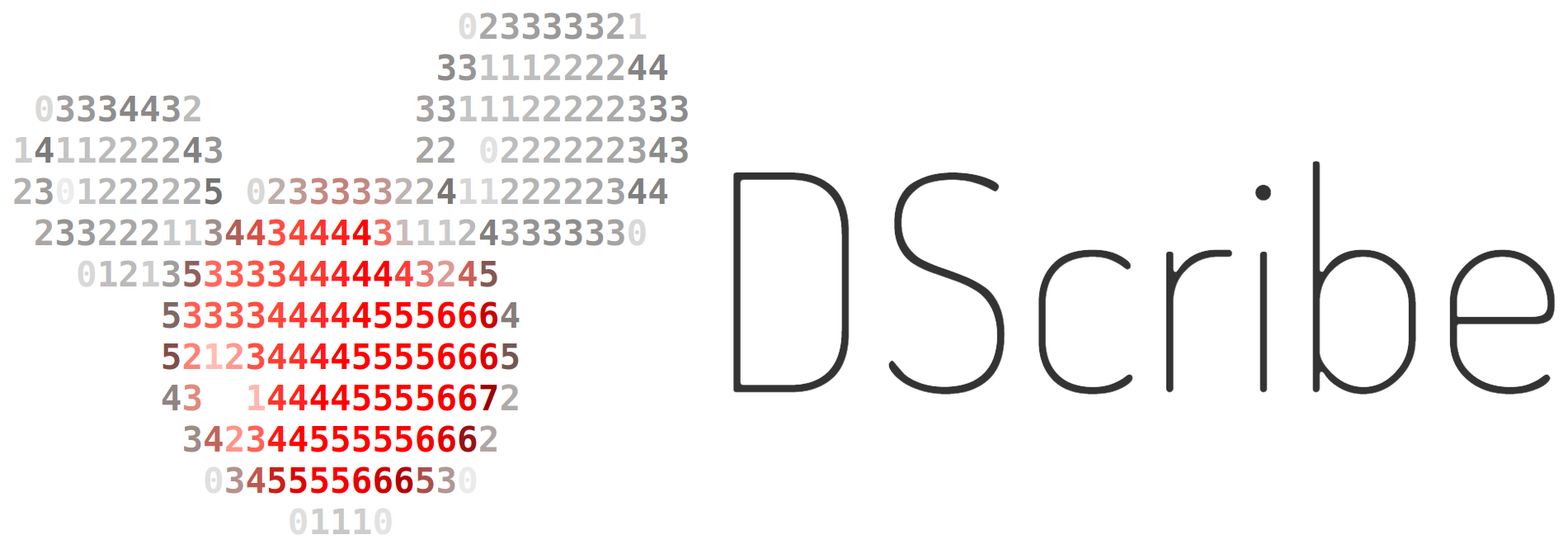
<style>
.page{position:relative;width:1568px;height:549px;background:#ffffff}
.page>*{position:absolute;margin:0}
.t1{font:305.2px "Dosis-ExtraLight";color:#333333}
</style>
<div class="page">
<p class="t1" style="left:732px;top:159px;width:825px;height:237px">DScribe</p>
</div>
